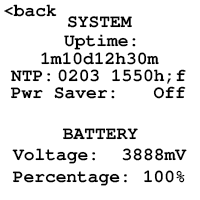
<style>
.page{position:relative;width:200px;height:200px;background:#ffffff}
.page>*{position:absolute;margin:0}
.t1{font:17.9px "FreeMonoBold";color:#000000}
</style>
<div class="page">
<p class="t1" style="left:4px;top:4px;width:53px;height:13px">&lt;back</p>
<p class="t1" style="left:67px;top:16px;width:65px;height:12px">SYSTEM</p>
<p class="t1" style="left:64px;top:34px;width:72px;height:16px">Uptime:</p>
<p class="t1" style="left:41px;top:52px;width:118px;height:13px">1m10d12h30m</p>
<p class="t1" style="left:10px;top:70px;width:41px;height:12px">NTP:</p>
<p class="t1" style="left:58px;top:69px;width:128px;height:15px">0203 1550h;f</p>
<p class="t1" style="left:10px;top:87px;width:105px;height:12px">Pwr Saver:</p>
<p class="t1" style="left:153px;top:86px;width:33px;height:13px">Off</p>
<p class="t1" style="left:62px;top:128px;width:76px;height:12px">BATTERY</p>
<p class="t1" style="left:12px;top:148px;width:84px;height:16px">Voltage:</p>
<p class="t1" style="left:122px;top:148px;width:65px;height:13px">3888mV</p>
<p class="t1" style="left:12px;top:171px;width:115px;height:15px">Percentage:</p>
<p class="t1" style="left:144px;top:170px;width:41px;height:13px">100%</p>
</div>
